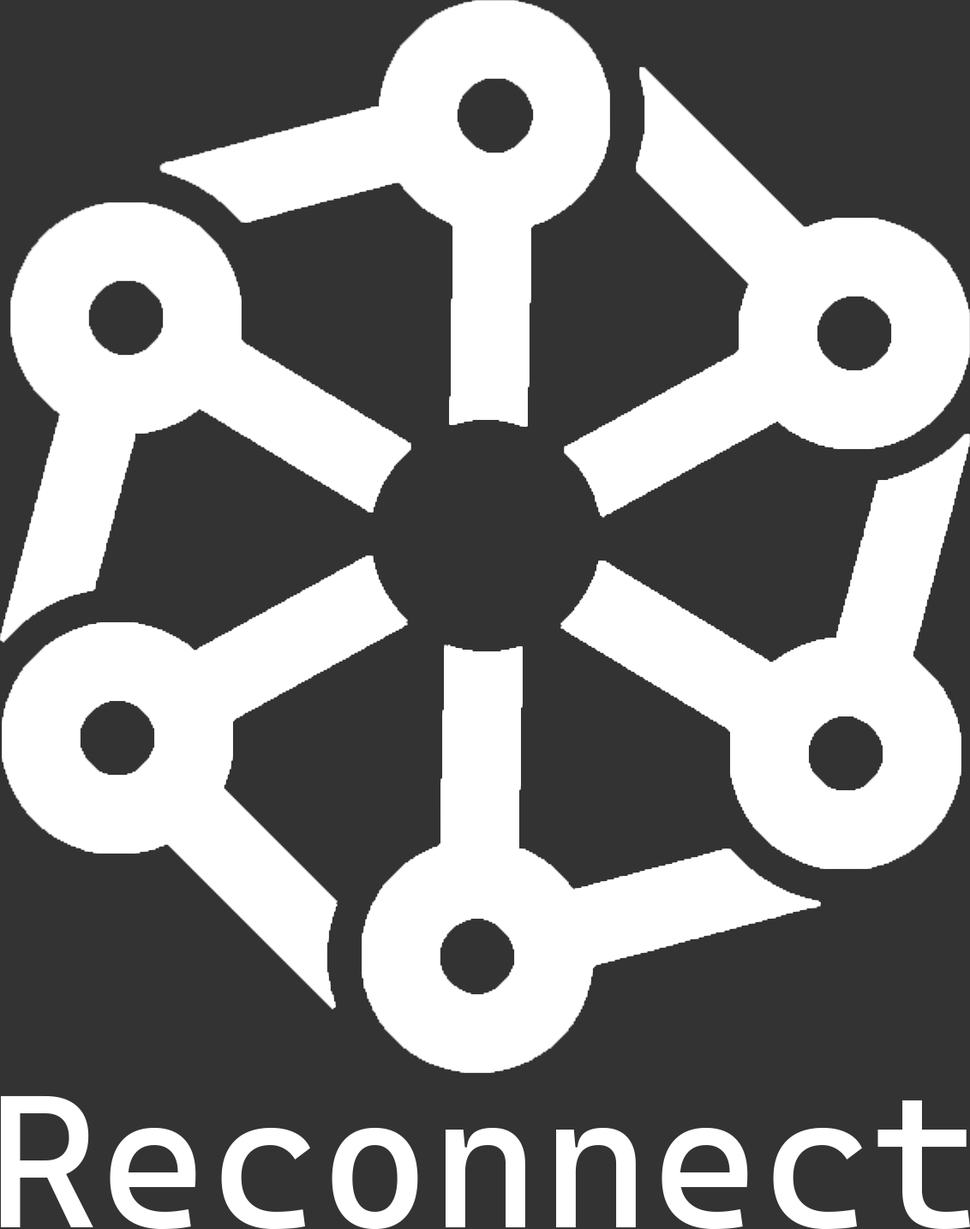
<style>
.page{position:relative;width:970px;height:1229px;background:#333333}
.page>*{position:absolute;margin:0}
.t1{font:188.6px "CascadiaCode-Regular";color:#ffffff}
</style>
<div class="page">
<p class="t1" style="left:1px;top:1095px;width:969px;height:134px">Reconnect</p>
</div>
